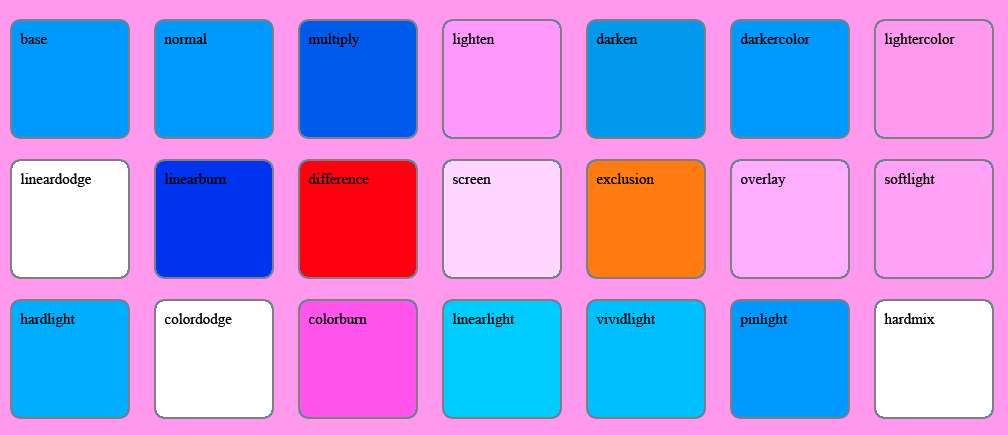
<style>
.page{position:relative;width:1008px;height:435px;background:#ff99ed}
.page>*{position:absolute;margin:0}
.t1{font:15px "TimesNewRomanPSMT";color:#000000}
</style>
<div class="page">
<p class="t1" style="left:20px;top:33px;width:27px;height:11px">base</p>
<p class="t1" style="left:164px;top:33px;width:43px;height:11px">normal</p>
<p class="t1" style="left:308px;top:33px;width:52px;height:14px">multiply</p>
<p class="t1" style="left:452px;top:33px;width:43px;height:14px">lighten</p>
<p class="t1" style="left:596px;top:33px;width:42px;height:11px">darken</p>
<p class="t1" style="left:740px;top:33px;width:70px;height:11px">darkercolor</p>
<p class="t1" style="left:884px;top:33px;width:71px;height:14px">lightercolor</p>
<p class="t1" style="left:20px;top:173px;width:72px;height:14px">lineardodge</p>
<p class="t1" style="left:164px;top:173px;width:63px;height:11px">linearburn</p>
<p class="t1" style="left:308px;top:173px;width:61px;height:11px">difference</p>
<p class="t1" style="left:596px;top:173px;width:58px;height:11px">exclusion</p>
<p class="t1" style="left:740px;top:173px;width:46px;height:14px">overlay</p>
<p class="t1" style="left:885px;top:173px;width:50px;height:14px">softlight</p>
<p class="t1" style="left:453px;top:177px;width:38px;height:7px">screen</p>
<p class="t1" style="left:20px;top:313px;width:55px;height:14px">hardlight</p>
<p class="t1" style="left:164px;top:313px;width:68px;height:14px">colordodge</p>
<p class="t1" style="left:308px;top:313px;width:59px;height:11px">colorburn</p>
<p class="t1" style="left:452px;top:313px;width:63px;height:14px">linearlight</p>
<p class="t1" style="left:596px;top:313px;width:59px;height:14px">vividlight</p>
<p class="t1" style="left:740px;top:313px;width:48px;height:14px">pinlight</p>
<p class="t1" style="left:884px;top:313px;width:51px;height:11px">hardmix</p>
</div>
